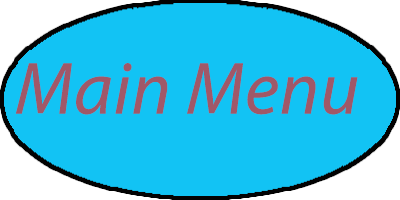
<style>
.page{position:relative;width:400px;height:200px;background:#12c3f4}
.page>*{position:absolute;margin:0}
.t1{font:74.5px "MyriadPro-It";letter-spacing:0.01em;color:#a05868}
</style>
<div class="page">
<p class="t1" style="left:15px;top:63px;width:343px;height:52px">Main Menu</p>
</div>
